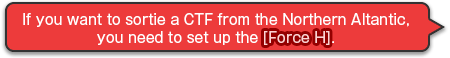
<style>
.page{position:relative;width:450px;height:58px;background:#ed3b3b}
.page>*{position:absolute;margin:0}
.t1{font:14px/18px "GothicMB101Pro-Regular";color:#ffffff}
.t2{font:14px/18px "GothicMB101Pro-Regular";color:#ffd3d3}
</style>
<div class="page">
<p class="t1" style="left:23px;top:13px;width:386px;height:32px;text-align:center">If you want to sortie a CTF from the Northern Altantic,<br>you need to set up the <span class="t2">[Force H]</span>.</p>
<p class="t1" style="left:23px;top:13px;width:386px;height:32px;text-align:center">If you want to sortie a CTF from the Northern Altantic,<br>you need to set up the <span class="t2">[Force H]</span>.</p>
</div>
